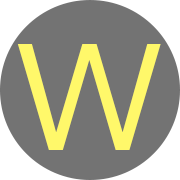
<style>
.page{position:relative;width:180px;height:180px;background:#737373}
.page>*{position:absolute;margin:0}
.t1{font:150px "Avenir-Roman";color:#fff86a}
</style>
<div class="page">
<p class="t1" style="left:17px;top:44px;width:144px;height:106px">W</p>
</div>
